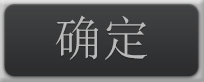
<style>
.page{position:relative;width:204px;height:82px}
.page>*{position:absolute;margin:0}
.t1{font:48px "SimSun";color:#bababa}
</style>
<div class="page">
<p class="t1" style="left:55px;top:15px;width:92px;height:45px">确定</p>
</div>
